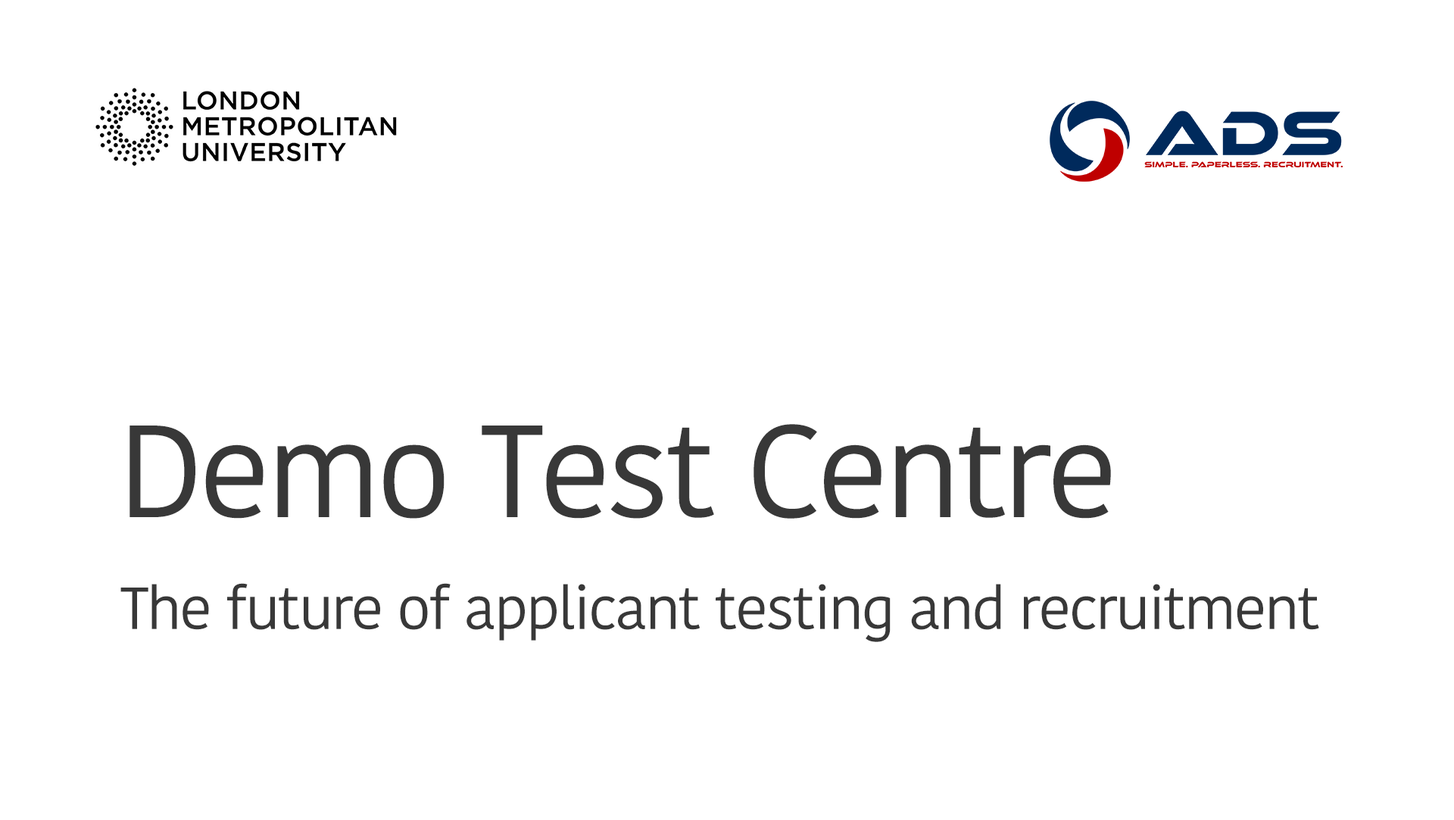
<style>
.page{position:relative;width:1454px;height:820px;background:#ffffff}
.page>*{position:absolute;margin:0}
.t1{font:223.6px "KohinoorDevanagari-Regular";letter-spacing:-0.035em;color:#383838}
.t2{font:101.2px "KohinoorDevanagari-Regular";letter-spacing:-0.035em;color:#383838}
</style>
<div class="page">
<p class="t1" style="left:129px;top:424px;width:982px;height:95px">Demo Test Centre</p>
<p class="t2" style="left:120px;top:583px;width:1199px;height:59px">The future of applicant testing and recruitment</p>
</div>
